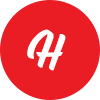
<style>
.page{position:relative;width:100px;height:100px;background:#ea1d25}
.page>*{position:absolute;margin:0}
.t1{font:55px "iCielRukola";color:#ffffff;font-weight:bold}
</style>
<div class="page">
<p class="t1" style="left:27px;top:29px;width:39px;height:42px">H</p>
</div>
